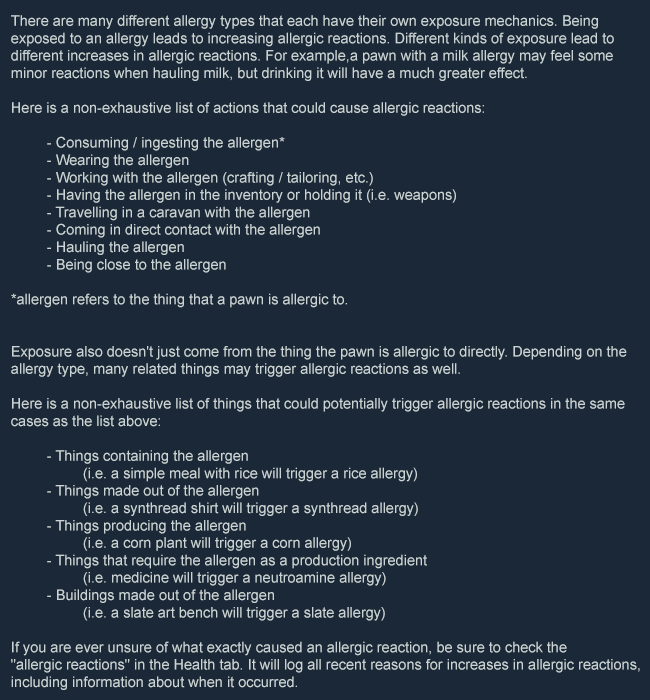
<style>
.page{position:relative;width:650px;height:700px;background:#1b2838}
.page>*{position:absolute;margin:0}
.t1{font:14.5px "ArialMT";color:#cbd4d4}
</style>
<div class="page">
<p class="t1" style="left:11px;top:15px;width:629px;height:675px">There are many different allergy types that each have their own exposure mechanics. Being<br>exposed to an allergy leads to increasing allergic reactions. Different kinds of exposure lead to<br>different increases in allergic reactions. For example,a pawn with a milk allergy may feel some<br>minor reactions when hauling milk, but drinking it will have a much greater effect.<br><br>Here is a non-exhaustive list of actions that could cause allergic reactions:<br><br> - Consuming / ingesting the allergen*<br> - Wearing the allergen<br> - Working with the allergen (crafting / tailoring, etc.)<br> - Having the allergen in the inventory or holding it (i.e. weapons)<br> - Travelling in a caravan with the allergen<br> - Coming in direct contact with the allergen<br> - Hauling the allergen<br> - Being close to the allergen<br><br>*allergen refers to the thing that a pawn is allergic to.<br><br><br>Exposure also doesn't just come from the thing the pawn is allergic to directly. Depending on the<br>allergy type, many related things may trigger allergic reactions as well.<br><br>Here is a non-exhaustive list of things that could potentially trigger allergic reactions in the same<br>cases as the list above:<br><br> - Things containing the allergen<br>  (i.e. a simple meal with rice will trigger a rice allergy)<br> - Things made out of the allergen<br>  (i.e. a synthread shirt will trigger a synthread allergy)<br> - Things producing the allergen<br>  (i.e. a corn plant will trigger a corn allergy)<br> - Things that require the allergen as a production ingredient<br>  (i.e. medicine will trigger a neutroamine allergy)<br> - Buildings made out of the allergen<br>  (i.e. a slate art bench will trigger a slate allergy)<br><br>If you are ever unsure of what exactly caused an allergic reaction, be sure to check the <br>"allergic reactions" in the Health tab. It will log all recent reasons for increases in allergic reactions,<br>including information about when it occurred.</p>
</div>
